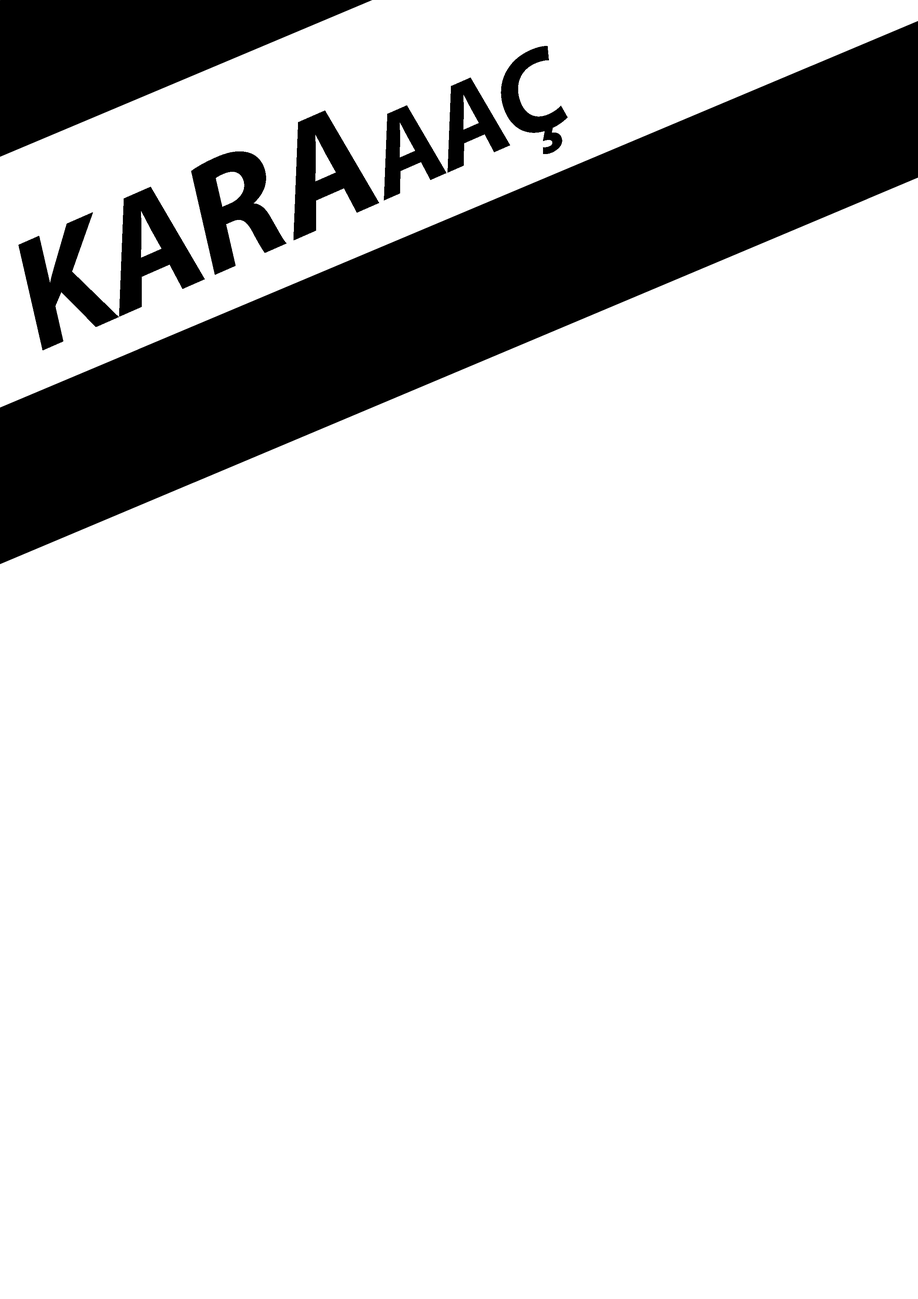
<style>
.page{position:relative;width:918px;height:1299px;background:#ffffff}
.page>*{position:absolute;margin:0}
.t1{font:157.3px "MyriadPro-BoldIt";color:#000000}
.t2{font:115.7px "MyriadPro-BoldIt";color:#000000}
</style>
<div class="page">
<p class="t1" style="left:19px;top:46px;width:549px;height:304px;rotate:-24deg">KARA<span class="t2">AAÇ</span></p>
</div>
